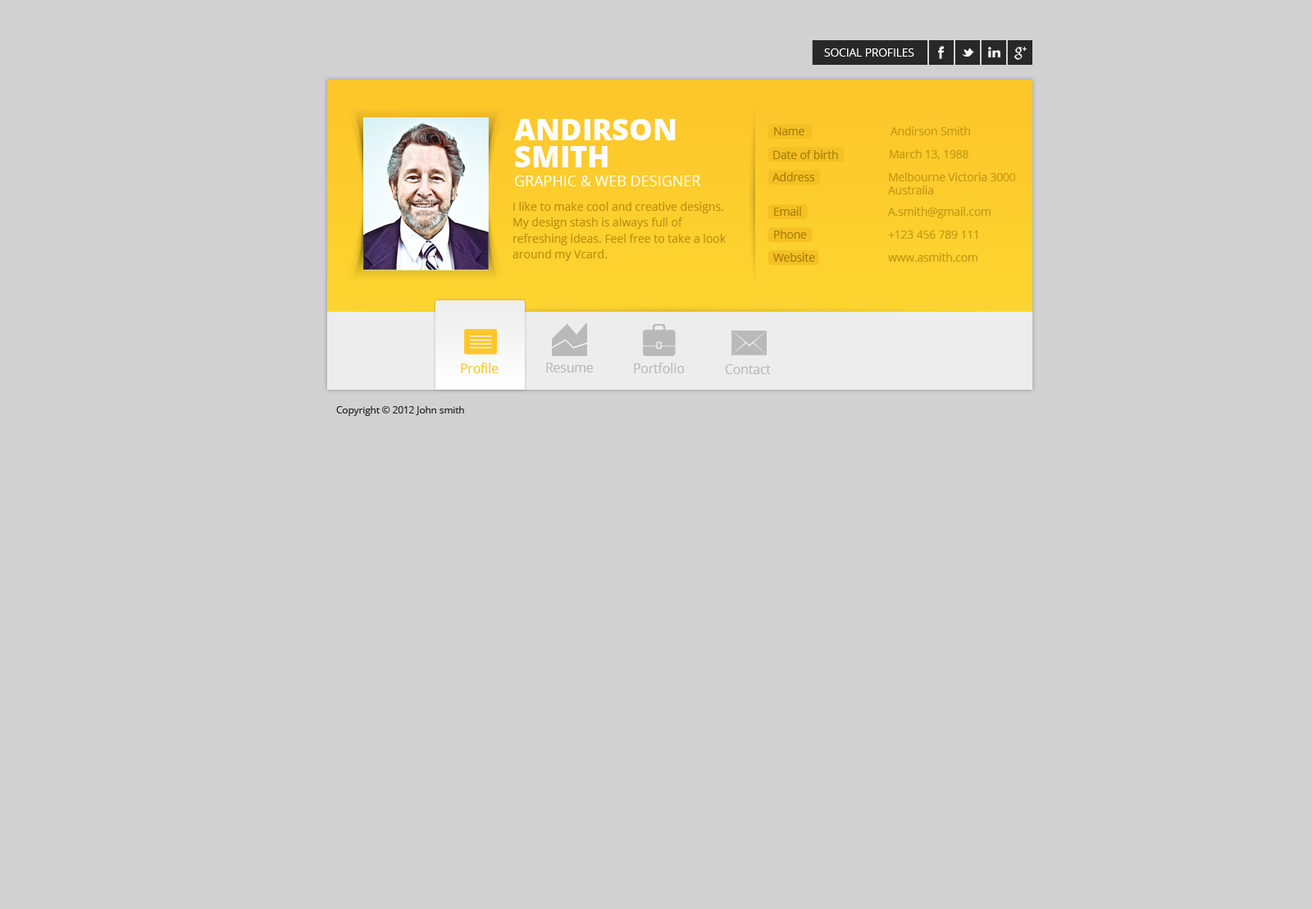
<style>
.page{position:relative;width:1312px;height:909px;background:#d1d1d1}
.page>*{position:absolute;margin:0}
.t1{font:11.2px "OpenSans";color:#ffffff;text-transform:uppercase}
.t2{font:29.5px/27.1px "OpenSans-Extrabold";color:#ffffff}
.t3{font:11.2px "OpenSans";color:#a87f09}
.t4{font:11.2px "OpenSans";color:#c59814}
.t5{font:14.8px "OpenSans";color:#ffffff;text-transform:uppercase}
.t6{font:11.5px/15.9px "OpenSans";color:#bc9010}
.t7{font:12.8px "OpenSans";color:#fdc62a}
.t8{font:12.8px "OpenSans";color:#b9b9b9}
.t9{font:9.6px "OpenSans";color:#282828}
</style>
<div class="page">
<p class="t1" style="left:824px;top:48px;width:90px;height:9px">Social profiles</p>
<p class="t2" style="left:514px;top:119px;width:162px;height:48px">ANDIRSON<br>SMITH</p>
<p class="t3" style="left:774px;top:127px;width:31px;height:8px">Name</p>
<p class="t4" style="left:891px;top:126px;width:79px;height:9px">Andirson Smith</p>
<p class="t4" style="left:890px;top:149px;width:79px;height:10px">March 13, 1988</p>
<p class="t3" style="left:773px;top:150px;width:65px;height:9px">Date of birth</p>
<p class="t3" style="left:773px;top:172px;width:42px;height:9px">Address</p>
<p class="t4" style="left:888px;top:172px;width:128px;height:22px">Melbourne Victoria 3000 <br>Australia</p>
<p class="t5" style="left:515px;top:176px;width:185px;height:10px">Graphic &amp; web designer</p>
<p class="t6" style="left:513px;top:202px;width:213px;height:59px">I like to make cool and creative designs. <br>My design stash is always full of <br>refreshing ideas. Feel free to take a look <br>around my Vcard.</p>
<p class="t3" style="left:774px;top:207px;width:27px;height:9px">Email</p>
<p class="t4" style="left:888px;top:207px;width:103px;height:11px">A.smith@gmail.com</p>
<p class="t3" style="left:774px;top:230px;width:33px;height:9px">Phone</p>
<p class="t4" style="left:888px;top:230px;width:90px;height:9px">+123 456 789 111</p>
<p class="t3" style="left:773px;top:253px;width:42px;height:9px">Website</p>
<p class="t4" style="left:888px;top:253px;width:90px;height:9px">www.asmith.com</p>
<p class="t7" style="left:461px;top:363px;width:38px;height:10px">Profile</p>
<p class="t8" style="left:546px;top:363px;width:47px;height:9px">Resume</p>
<p class="t8" style="left:634px;top:363px;width:51px;height:10px">Portfolio</p>
<p class="t8" style="left:725px;top:364px;width:46px;height:10px">Contact</p>
<p class="t9" style="left:336px;top:406px;width:128px;height:10px">Copyright © 2012 John smith</p>
</div>
